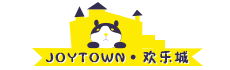
<style>
.page{position:relative;width:230px;height:70px;background:#ffffff}
.page>*{position:absolute;margin:0}
.t1{font:14.5px "FZSEJW--GB1-0";letter-spacing:0.1em;color:#352d51}
</style>
<div class="page">
<p class="t1" style="left:45px;top:50px;width:144px;height:14px">JOYTOWN·欢乐城</p>
</div>
